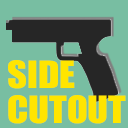
<style>
.page{position:relative;width:128px;height:128px;background:#78bea2}
.page>*{position:absolute;margin:0}
.t1{font:34.8px/34.7px "Impact";color:#ffe500;scale:1.1 1}
</style>
<div class="page">
<p class="t1" style="left:8px;top:60px;width:118px;height:64px">SIDE<br>CUTOUT</p>
</div>
